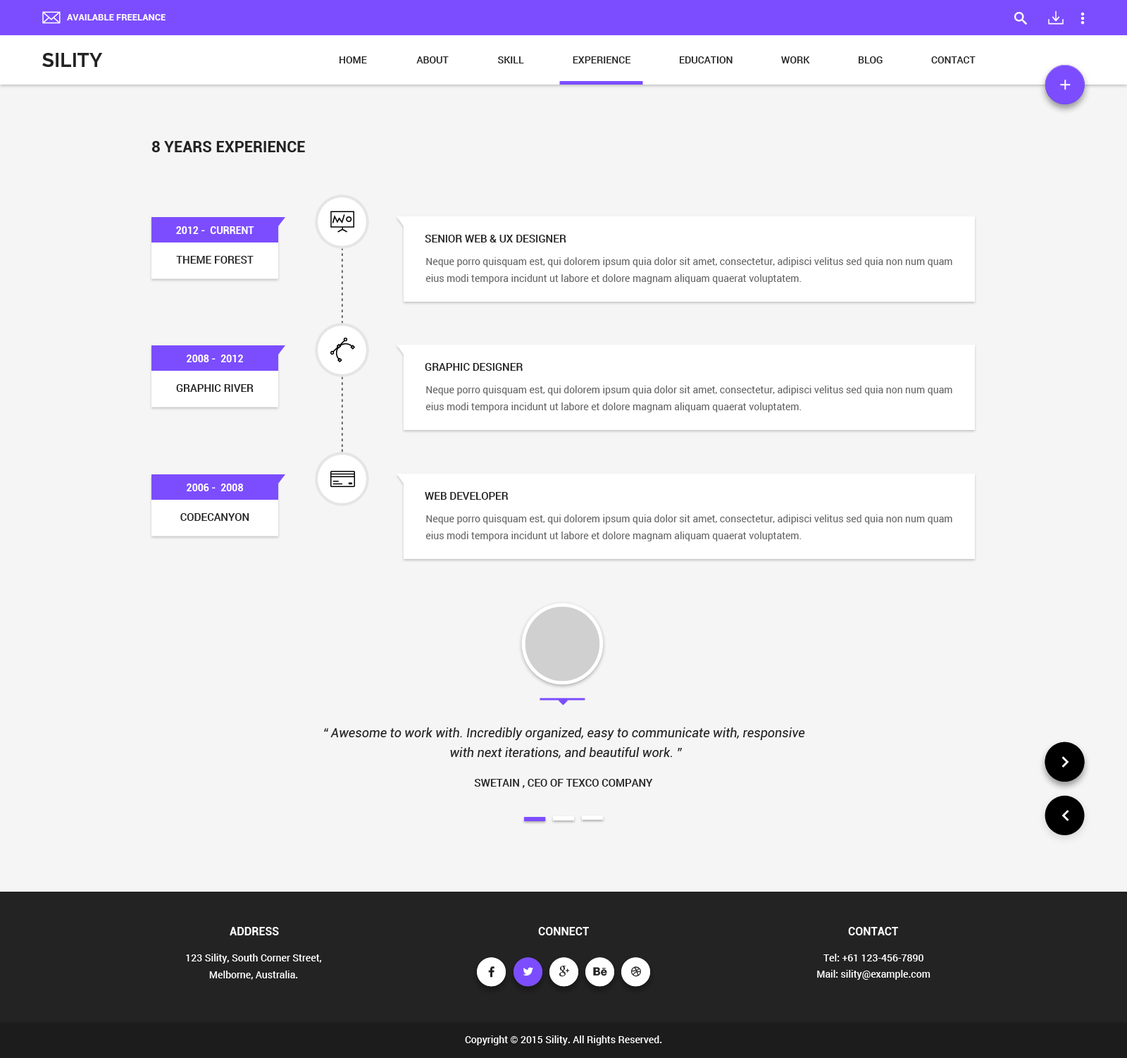
<style>
.page{position:relative;width:1127px;height:1058px;background:#f5f5f5}
.page>*{position:absolute;margin:0}
.t1{font:9.2px "Roboto-Bold";color:#ffffff;text-transform:uppercase}
.t2{font:19.7px "Raleway-Bold";color:#232323}
.t3{font:9.9px "Roboto-Medium";color:#232323;text-transform:uppercase}
.t4{font:15.5px "Roboto-Bold";color:#232323}
.t5{font:9.9px "Roboto-Bold";color:#ffffff;text-transform:uppercase}
.t6{font:9.9px "Roboto-Medium";letter-spacing:0.24em}
.t7{font:10.6px "Roboto-Medium";color:#232323;text-transform:uppercase}
.t8{font:9.9px/16.9px "Roboto-Regular";color:#666666}
.t9{font:12.7px/19.7px "Roboto-Italic";color:#232323}
.t10{font:11.3px "Roboto-Bold";color:#ffffff;text-transform:uppercase}
.t11{font:9.9px/16.9px "Roboto-Medium";color:#ffffff}
.t12{font:9.9px "Roboto-Medium";color:#ffffff}
</style>
<div class="page">
<p class="t1" style="left:67px;top:14px;width:99px;height:6px">available freelance</p>
<p class="t2" style="left:42px;top:53px;width:61px;height:14px">SILITY</p>
<p class="t3" style="left:340px;top:56px;width:27px;height:7px">home</p>
<p class="t3" style="left:416px;top:56px;width:33px;height:7px">about</p>
<p class="t3" style="left:498px;top:56px;width:26px;height:7px">skill</p>
<p class="t3" style="left:573px;top:56px;width:58px;height:7px">experience</p>
<p class="t3" style="left:680px;top:56px;width:53px;height:7px">education</p>
<p class="t3" style="left:781px;top:56px;width:29px;height:7px">work</p>
<p class="t3" style="left:859px;top:56px;width:24px;height:7px">blog</p>
<p class="t3" style="left:932px;top:56px;width:44px;height:7px">Contact</p>
<p class="t4" style="left:151px;top:141px;width:154px;height:11px">8 YEARS EXPERIENCE</p>
<p class="t5" style="left:176px;top:226px;width:78px;height:8px">2012 -  current</p>
<p class="t6" style="left:342px;top:242px;width:1px;height:260px;rotate:90deg">-----------------------------------------------</p>
<p class="t7" style="left:425px;top:235px;width:142px;height:7px">Senior Web &amp; UX Designer</p>
<p class="t7" style="left:176px;top:256px;width:78px;height:8px">theme forest</p>
<p class="t8" style="left:426px;top:257px;width:527px;height:27px">Neque porro quisquam est, qui dolorem ipsum quia dolor sit amet, consectetur, adipisci velitus sed quia non num quam eius modi tempora incidunt ut labore et dolore magnam aliquam quaerat voluptatem.</p>
<p class="t5" style="left:187px;top:354px;width:57px;height:8px">2008 -  2012</p>
<p class="t7" style="left:425px;top:363px;width:98px;height:8px">graphic designer</p>
<p class="t7" style="left:176px;top:384px;width:78px;height:8px">graphic river</p>
<p class="t8" style="left:426px;top:385px;width:527px;height:27px">Neque porro quisquam est, qui dolorem ipsum quia dolor sit amet, consectetur, adipisci velitus sed quia non num quam eius modi tempora incidunt ut labore et dolore magnam aliquam quaerat voluptatem.</p>
<p class="t5" style="left:187px;top:483px;width:57px;height:8px">2006 -  2008</p>
<p class="t7" style="left:425px;top:492px;width:84px;height:8px">web developer</p>
<p class="t7" style="left:180px;top:513px;width:69px;height:8px">codecanyon</p>
<p class="t8" style="left:426px;top:514px;width:527px;height:27px">Neque porro quisquam est, qui dolorem ipsum quia dolor sit amet, consectetur, adipisci velitus sed quia non num quam eius modi tempora incidunt ut labore et dolore magnam aliquam quaerat voluptatem.</p>
<p class="t9" style="left:324px;top:727px;width:481px;height:31px;text-align:center">“ Awesome to work with. Incredibly organized, easy to communicate with, responsive <br>with next iterations, and beautiful work. ”</p>
<p class="t7" style="left:474px;top:779px;width:179px;height:9px">swetain , CEO of Texco Company</p>
<p class="t10" style="left:230px;top:927px;width:49px;height:8px">Address</p>
<p class="t10" style="left:538px;top:927px;width:51px;height:8px">connect</p>
<p class="t10" style="left:848px;top:927px;width:50px;height:8px">contact</p>
<p class="t11" style="left:186px;top:953px;width:136px;height:26px;text-align:center">123 Sility, South Corner Street,<br>Melborne, Australia.</p>
<p class="t12" style="left:824px;top:953px;width:100px;height:8px">Tel: +61 123-456-7890</p>
<p class="t12" style="left:817px;top:970px;width:114px;height:9px">Mail: sility@example.com</p>
<p class="t12" style="left:465px;top:1035px;width:197px;height:10px">Copyright © 2015 Sility. All Rights Reserved.</p>
</div>
